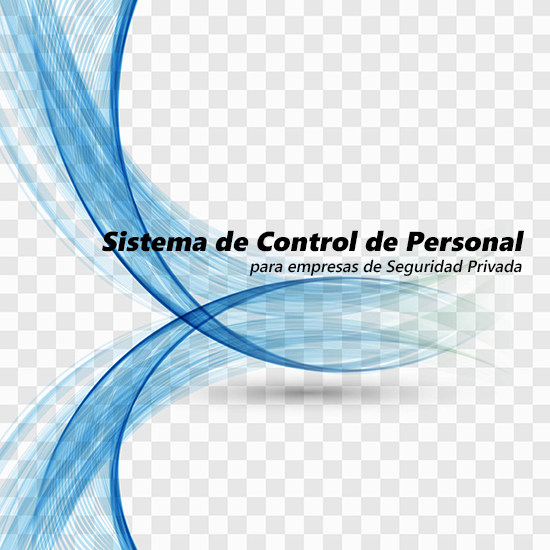
<style>
.page{position:relative;width:550px;height:550px;background:#fbfbfb}
.page>*{position:absolute;margin:0}
.t1{font:27.5px "SegoeUIBlack";color:#000000;font-style:italic}
.t2{font:16.5px "SegoeUI-Semibold";color:#000000;font-style:italic}
</style>
<div class="page">
<p class="t1" style="left:102px;top:230px;width:423px;height:22px">Sistema de Control de Personal</p>
<p class="t2" style="left:249px;top:259px;width:273px;height:17px">para empresas de Seguridad Privada</p>
</div>
